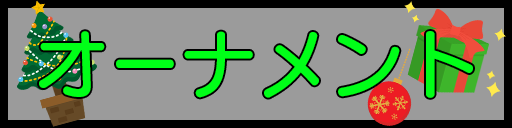
<style>
.page{position:relative;width:512px;height:128px;background:#9b9b9b}
.page>*{position:absolute;margin:0}
.t1{font:74px "SeuratProN-DB";color:#00ff18}
</style>
<div class="page">
<p class="t1" style="left:39px;top:31px;width:434px;height:67px">オーナメント</p>
</div>
